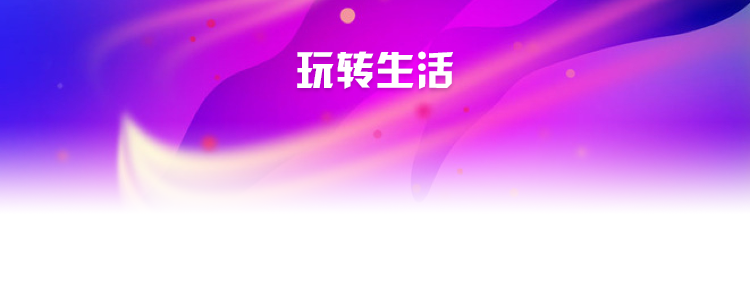
<style>
.page{position:relative;width:750px;height:284px;background:#ffffff}
.page>*{position:absolute;margin:0}
.t1{font:40px "HYk2gj";color:#ffffff}
</style>
<div class="page">
<p class="t1" style="left:297px;top:51px;width:156px;height:38px">玩转生活</p>
</div>
